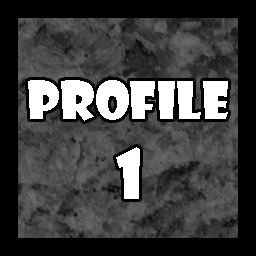
<style>
.page{position:relative;width:256px;height:256px;background:#000000}
.page>*{position:absolute;margin:0}
.t1{font:50px "ShowcardGothic-Reg";color:#ffffff}
.t2{font:66.7px "ShowcardGothic-Reg";color:#ffffff}
</style>
<div class="page">
<p class="t1" style="left:28px;top:80px;width:200px;height:119px;text-align:center">Profile<br><span class="t2">1</span></p>
</div>
